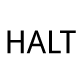
<style>
.page{position:relative;width:80px;height:80px;background:#ffffff}
.page>*{position:absolute;margin:0}
.t1{font:31.8px "DroidSans";color:#000000}
</style>
<div class="page">
<p class="t1" style="left:7px;top:30px;width:69px;height:24px">HALT</p>
</div>
